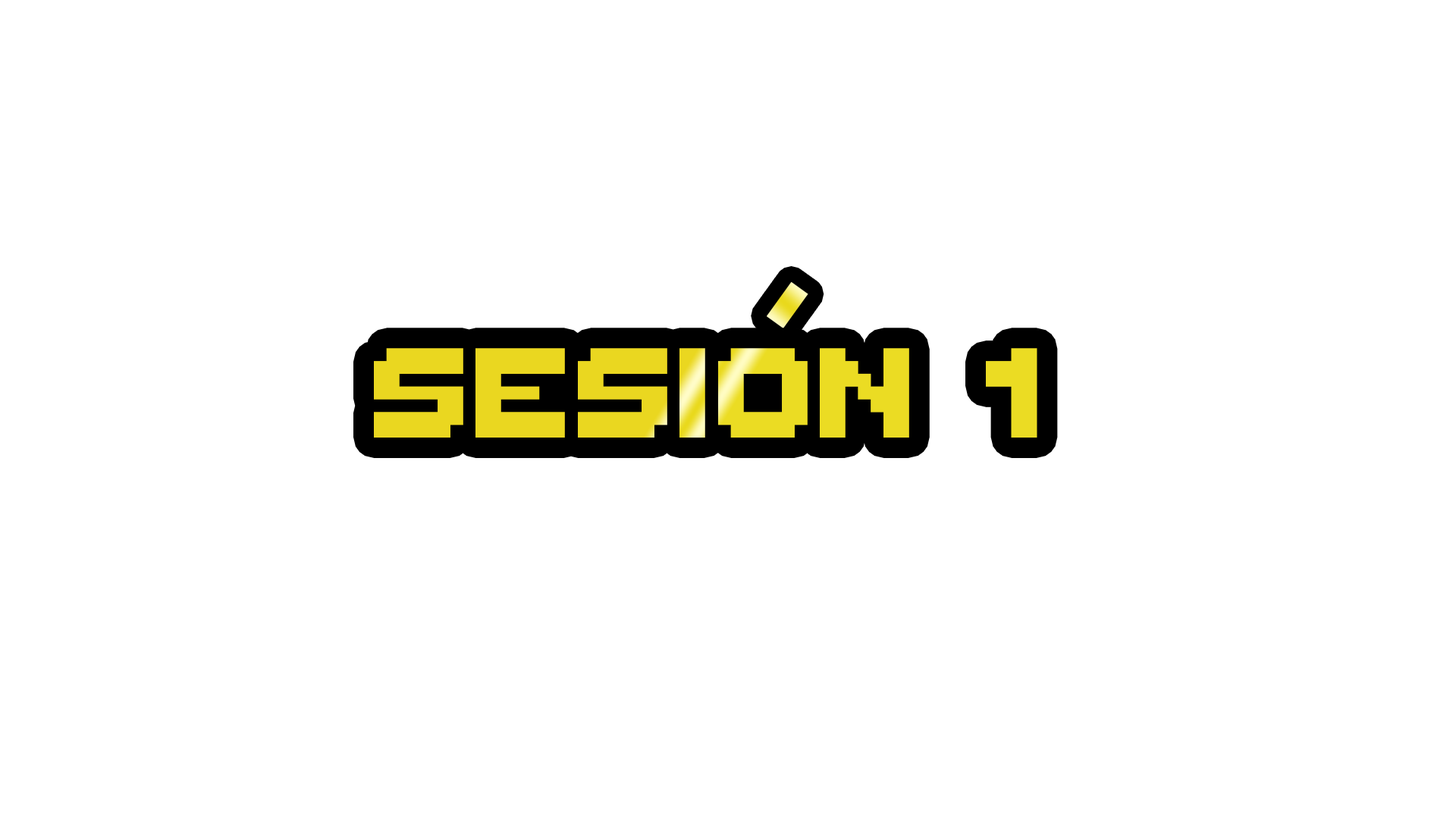
<style>
.page{position:relative;width:1456px;height:819px;background:#ffffff}
.page>*{position:absolute;margin:0}
.t1{font:96.4px "ThaleahFat";scale:1.69 1}
.t2{font:204px "ThaleahFat";color:#ead720}
</style>
<div class="page">
<p class="t1" style="left:767px;top:281px;width:41px;height:47px;rotate:36deg">i</p>
<p class="t2" style="left:374px;top:348px;width:663px;height:90px">Sesion 1</p>
</div>
